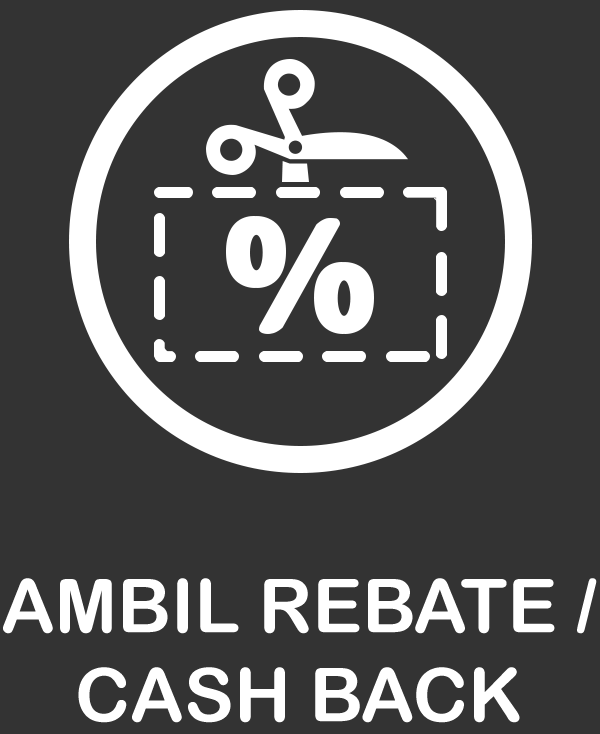
<style>
.page{position:relative;width:600px;height:734px;background:#333333}
.page>*{position:absolute;margin:0}
.t1{font:74.3px "ArialRoundedMTBold";color:#ffffff}
</style>
<div class="page">
<p class="t1" style="left:3px;top:578px;width:594px;height:145px;text-align:center">AMBIL REBATE /<br>CASH BACK</p>
</div>
